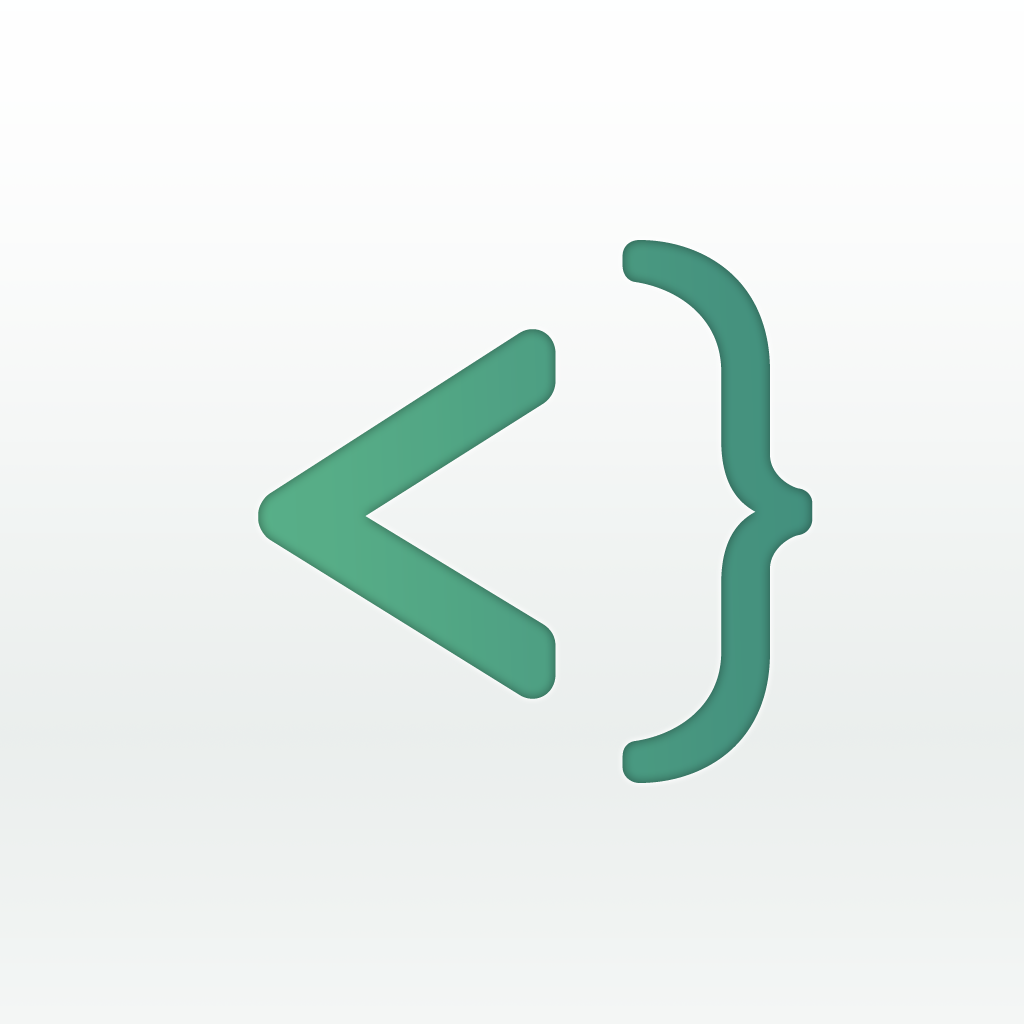
<style>
.page{position:relative;width:1024px;height:1024px}
.page>*{position:absolute;margin:0}
.t1{font:1296px "BrandonGrotesque-Regular";letter-spacing:0.035em;color:#4a987f;font-weight:bold;scale:0.97 1}
.t2{font:890px "BrandonGrotesque-Regular";letter-spacing:0.035em;color:#4a987f;font-weight:bold;scale:0.97 1}
</style>
<div class="page">
<p class="t1" style="left:258px;top:240px;width:555px;height:543px">&lt;<span class="t2">}</span></p>
</div>
